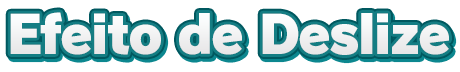
<style>
.page{position:relative;width:460px;height:72px;background:#ffffff}
.page>*{position:absolute;margin:0}
.t1{font:52px "RodinPro-UB";letter-spacing:-0.039em;color:#f1f1f2}
</style>
<div class="page">
<p class="t1" style="left:10px;top:12px;width:439px;height:43px">Efeito de Deslize</p>
</div>
